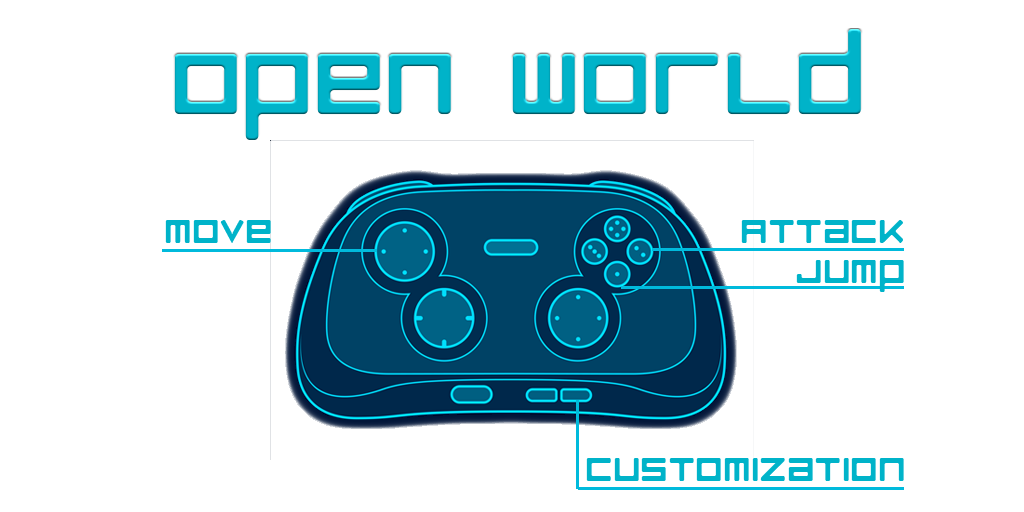
<style>
.page{position:relative;width:1024px;height:512px;background:#ffffff}
.page>*{position:absolute;margin:0}
.t1{font:111.1px "LuggageRoundRegular";color:#00b3c9}
.t2{font:42.7px "LuggageRoundRegular";color:#00b3c9}
</style>
<div class="page">
<p class="t1" style="left:174px;top:29px;width:687px;height:111px">Open World</p>
<p class="t2" style="left:165px;top:220px;width:106px;height:23px">Move</p>
<p class="t2" style="left:741px;top:220px;width:162px;height:23px">Attack</p>
<p class="t2" style="left:796px;top:260px;width:108px;height:32px">jump</p>
<p class="t2" style="left:586px;top:458px;width:318px;height:23px">customization</p>
</div>
